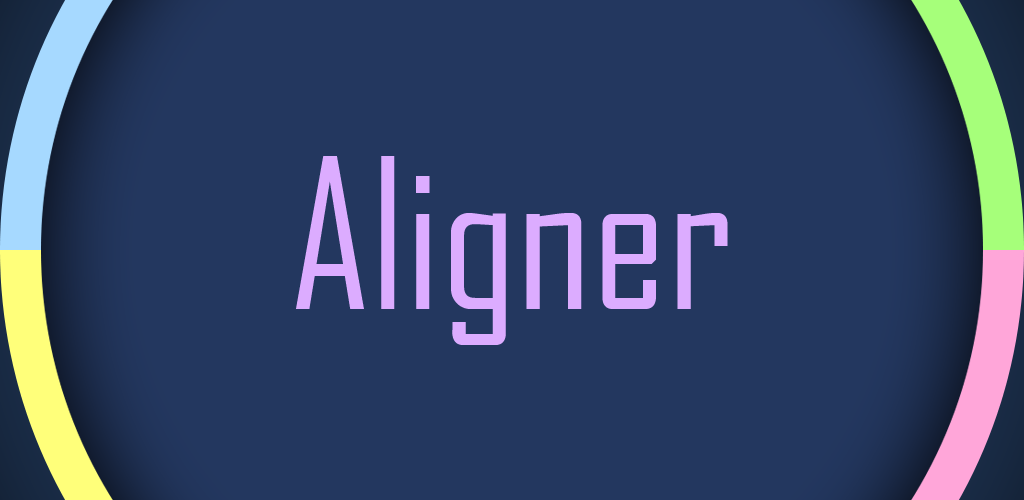
<style>
.page{position:relative;width:1024px;height:500px;background:#23375f}
.page>*{position:absolute;margin:0}
.t1{font:200px "AgencyFB-Reg";color:#dcacff}
</style>
<div class="page">
<p class="t1" style="left:296px;top:156px;width:432px;height:189px">Aligner</p>
</div>
